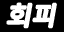
<style>
.page{position:relative;width:64px;height:32px;background:#000000}
.page>*{position:absolute;margin:0}
.t1{font:25px "MalgunGothicBold";color:#ffffff;font-style:italic}
</style>
<div class="page">
<p class="t1" style="left:7px;top:3px;width:49px;height:25px">회피</p>
</div>
